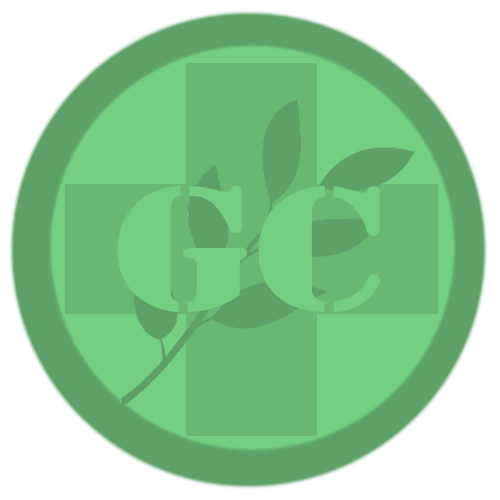
<style>
.page{position:relative;width:500px;height:500px;background:#ffffff}
.page>*{position:absolute;margin:0}
.t1{font:183px "ArmyWide";color:#72ce80}
</style>
<div class="page">
<p class="t1" style="left:117px;top:185px;width:263px;height:127px">GC</p>
</div>
